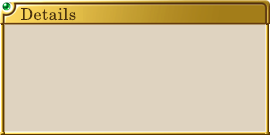
<style>
.page{position:relative;width:272px;height:135px;background:#dfd3c0}
.page>*{position:absolute;margin:0}
.t1{font:16px "CenturySchoolbook";letter-spacing:0.025em;color:#4b320e}
</style>
<div class="page">
<p class="t1" style="left:21px;top:8px;width:55px;height:13px">Details</p>
</div>
